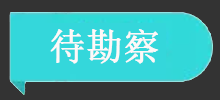
<style>
.page{position:relative;width:220px;height:100px;background:#333333}
.page>*{position:absolute;margin:0}
.t1{font:36px "SimSun";color:#fef8f8;font-weight:bold}
</style>
<div class="page">
<p class="t1" style="left:50px;top:29px;width:109px;height:35px">待勘察</p>
</div>
